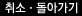
<style>
.page{position:relative;width:82px;height:16px;background:#000000}
.page>*{position:absolute;margin:0}
.t1{font:12px "KoreanGD13-R";color:#ffffff}
</style>
<div class="page">
<p class="t1" style="left:5px;top:2px;width:73px;height:12px">취소·돌아가기</p>
</div>
